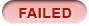
<style>
.page{position:relative;width:89px;height:26px}
.page>*{position:absolute;margin:0}
.t1{font:14px "Arial-BoldMT";letter-spacing:0.05em;color:#a21703}
</style>
<div class="page">
<p class="t1" style="left:19px;top:8px;width:53px;height:10px">FAILED</p>
</div>
